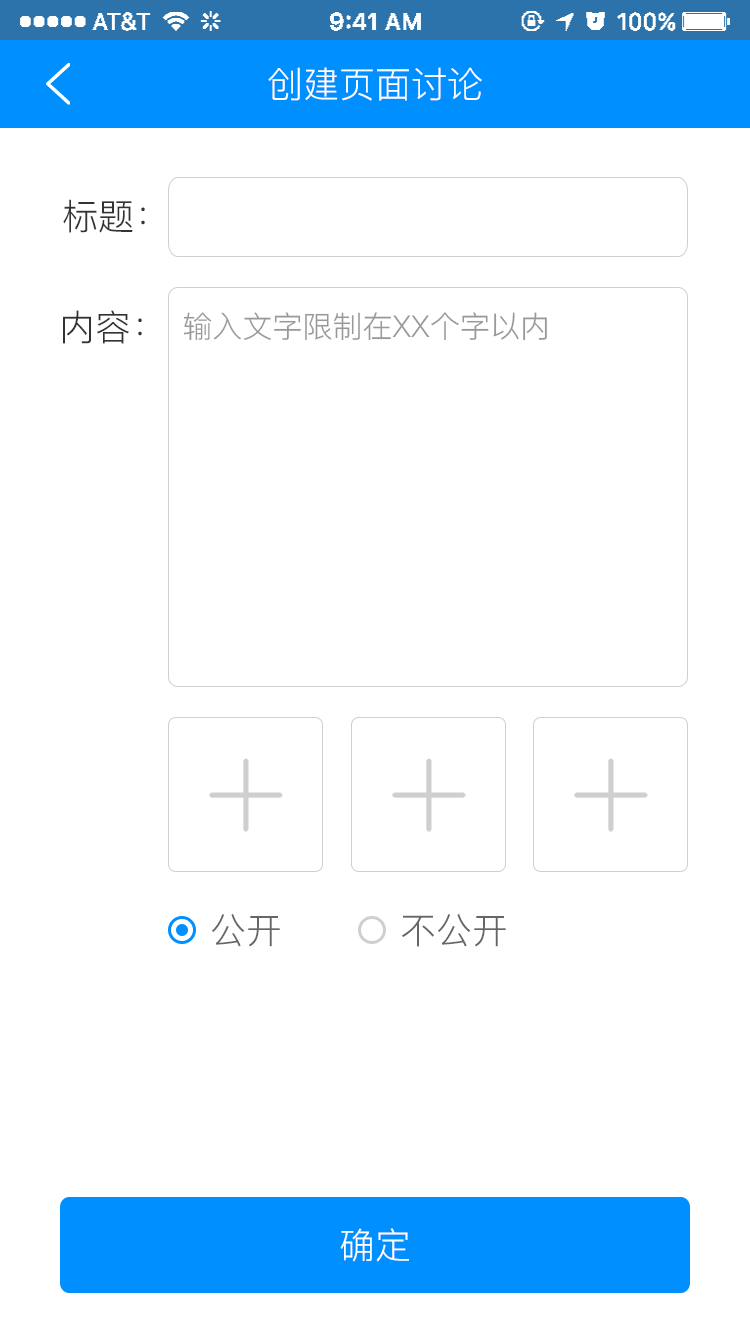
<style>
.page{position:relative;width:750px;height:1334px;background:#ffffff}
.page>*{position:absolute;margin:0}
.t1{font:36px "PingFang-SC-Regular";color:#ffffff}
.t2{font:36px "PingFang-SC-Regular";color:#333333}
.t3{font:30px "PingFang-SC-Regular";color:#999999}
.t4{font:36px "PingFang-SC-Regular";color:#666666}
</style>
<div class="page">
<p class="t1" style="left:268px;top:67px;width:214px;height:34px">创建页面讨论</p>
<p class="t2" style="left:63px;top:199px;width:82px;height:34px">标题：</p>
<p class="t2" style="left:63px;top:310px;width:79px;height:34px">内容：</p>
<p class="t3" style="left:183px;top:312px;width:364px;height:29px">输入文字限制在XX个字以内</p>
<p class="t4" style="left:212px;top:913px;width:68px;height:34px">公开</p>
<p class="t4" style="left:402px;top:913px;width:104px;height:34px">不公开</p>
<p class="t1" style="left:340px;top:1228px;width:69px;height:34px">确定</p>
</div>
